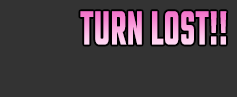
<style>
.page{position:relative;width:237px;height:97px;background:#333333}
.page>*{position:absolute;margin:0}
.t1{font:51.9px "Teko-Semibold";font-weight:bold;scale:0.64 1}
</style>
<div class="page">
<p class="t1" style="left:80px;top:11px;width:147px;height:34px">TURN LOST!!</p>
</div>
